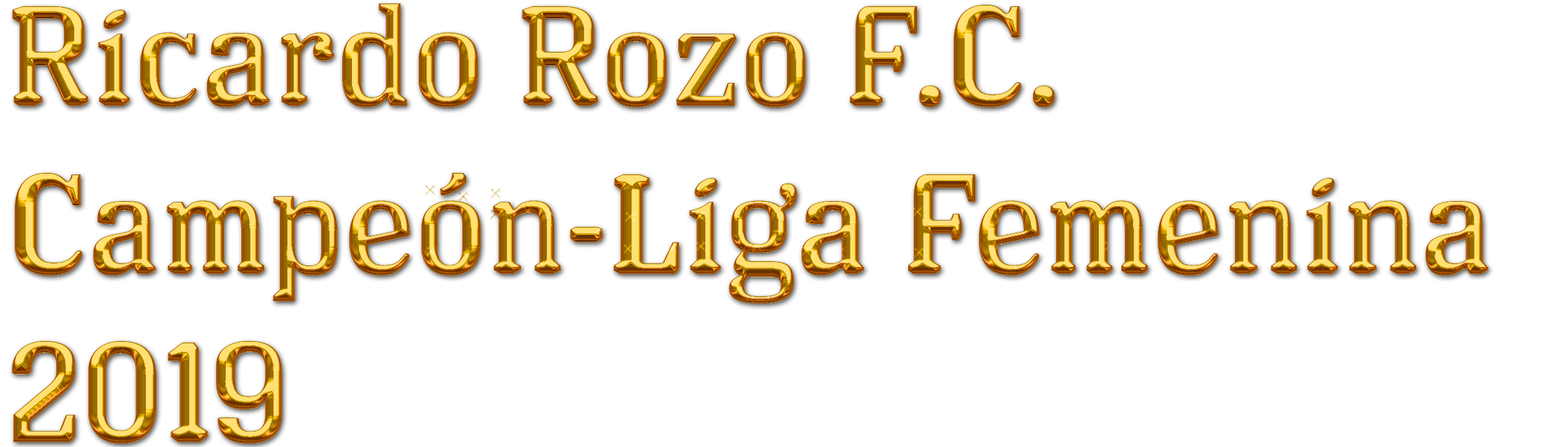
<style>
.page{position:relative;width:1568px;height:447px;background:#ffffff}
.page>*{position:absolute;margin:0}
.t1{font:140.3px "LosFelizOT-Roman"}
</style>
<div class="page">
<p class="t1" style="left:12px;top:4px;width:1477px;height:440px">Ricardo Rozo F.C.<br>Campeón-Liga Femenina<br>2019</p>
</div>
